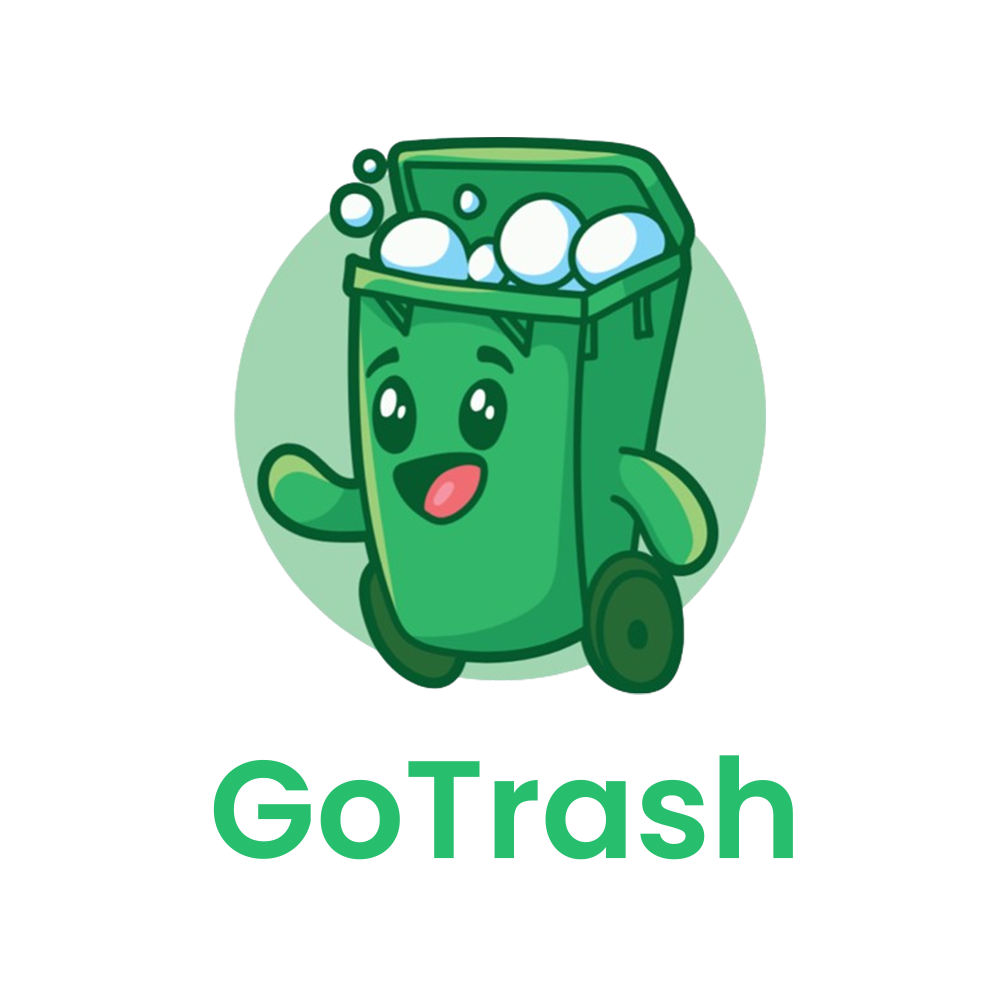
<style>
.page{position:relative;width:1000px;height:1000px;background:#ffffff}
.page>*{position:absolute;margin:0}
.t1{font:138.7px "Poppins-SemiBold";color:#27be6e}
</style>
<div class="page">
<p class="t1" style="left:213px;top:755px;width:580px;height:105px">GoTrash</p>
</div>
